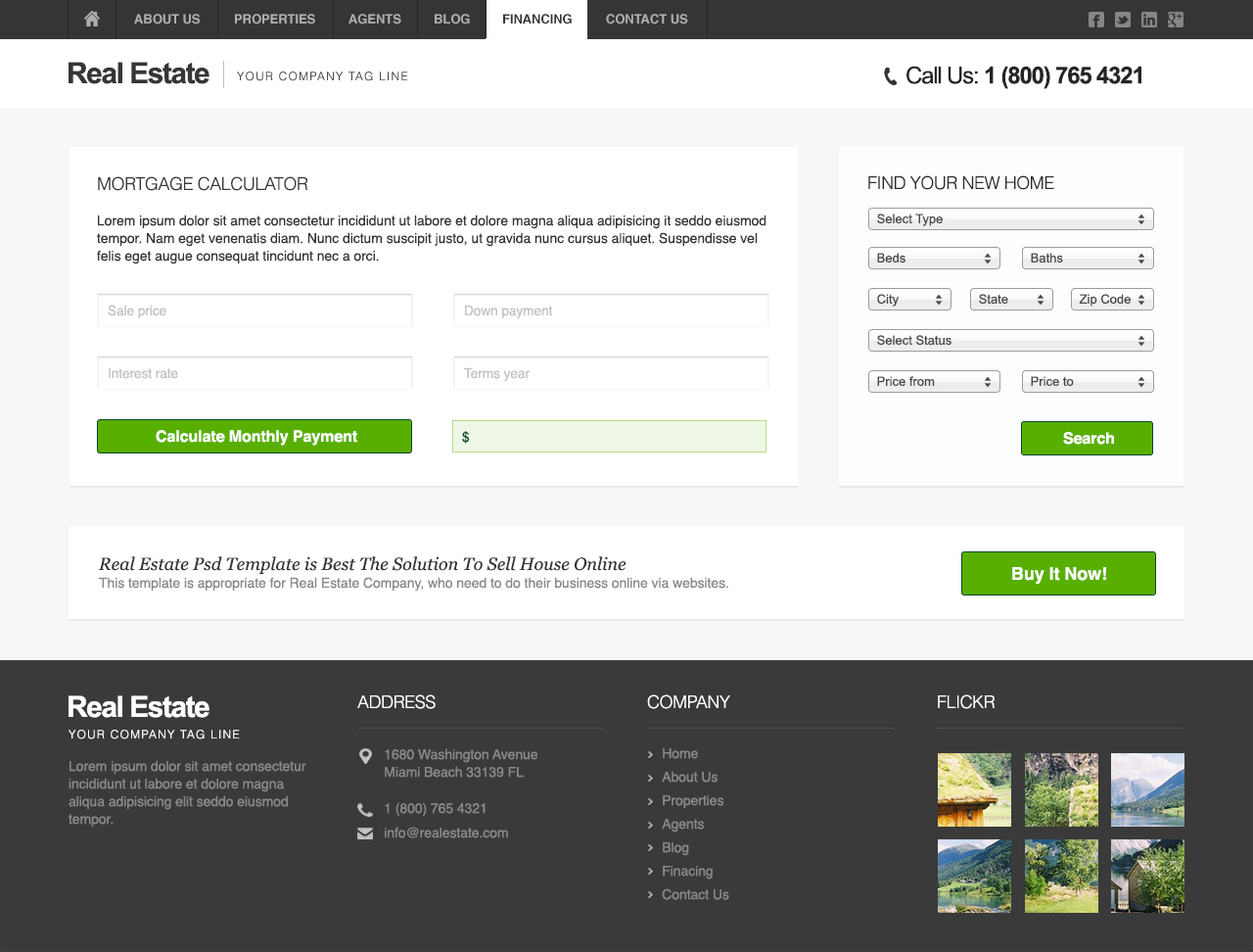
<style>
.page{position:relative;width:1253px;height:952px;background:#ffffff}
.page>*{position:absolute;margin:0}
.t1{font:12.7px "Helvetica-Bold";letter-spacing:-0.005em;color:#aeaeae;text-transform:uppercase}
.t2{font:12.7px "Helvetica-Bold";letter-spacing:-0.005em;color:#363636;text-transform:uppercase}
.t3{font:29.4px "Arial-BoldMT";letter-spacing:-0.05em;color:#363636}
.t4{font:23.5px "Arial-BoldMT";letter-spacing:-0.05em;color:#252525}
.t5{font:23.5px "ArialMT";letter-spacing:-0.05em;color:#252525}
.t6{font:11.7px "Helvetica-Light";letter-spacing:0.1em;color:#4b4b4b;text-transform:uppercase}
.t7{font:17.6px "Helvetica-Light";letter-spacing:-0.025em;color:#363636;text-transform:uppercase}
.t8{font:17.6px "Helvetica-Light";letter-spacing:-0.025em;color:#292929;text-transform:uppercase}
.t9{font:13.7px/17.6px "Helvetica";letter-spacing:-0.005em;color:#363636}
.t10{font:13.7px/29.4px "Helvetica";letter-spacing:-0.005em;color:#363636}
.t11{font:13.7px "Helvetica";letter-spacing:-0.005em;color:#363636}
.t12{font:12.7px "ArialMT";color:#484848}
.t13{font:13.7px "Helvetica";letter-spacing:-0.005em;color:#c2c2c2}
.t14{font:15.7px "Helvetica-Bold";letter-spacing:-0.005em;color:#ffffff}
.t15{font:13.7px "Helvetica";letter-spacing:-0.005em;color:#094530}
.t16{font:13.7px/17.6px "Helvetica";letter-spacing:-0.005em;color:#898989}
.t17{font:17.6px/17.6px "Georgia-Italic";color:#363636}
.t18{font:17.6px "Helvetica-Bold";letter-spacing:-0.005em;color:#ffffff}
.t19{font:29.4px "Arial-BoldMT";letter-spacing:-0.05em;color:#ffffff}
.t20{font:17.6px "Helvetica-Light";letter-spacing:-0.025em;color:#ffffff;text-transform:uppercase}
.t21{font:11.7px "Helvetica-Light";letter-spacing:0.1em;color:#ffffff;text-transform:uppercase}
.t22{font:13.7px/23.5px "Helvetica";letter-spacing:-0.005em;color:#898989}
.t23{font:13.7px "Helvetica";letter-spacing:-0.005em;color:#898989}
</style>
<div class="page">
<p class="t1" style="left:134px;top:14px;width:66px;height:10px">About Us</p>
<p class="t1" style="left:235px;top:14px;width:80px;height:10px">Properties</p>
<p class="t1" style="left:349px;top:14px;width:52px;height:10px">AgentS</p>
<p class="t1" style="left:435px;top:14px;width:35px;height:10px">Blog</p>
<p class="t2" style="left:503px;top:14px;width:69px;height:10px">Financing</p>
<p class="t1" style="left:606px;top:14px;width:82px;height:10px">Contact US</p>
<p class="t3" style="left:69px;top:62px;width:141px;height:22px">Real Estate</p>
<p class="t4" style="left:907px;top:66px;width:235px;height:23px"><span class="t5">Call Us:</span> 1 (800) 765 4321</p>
<p class="t6" style="left:237px;top:71px;width:171px;height:10px">Your Company Tag Line</p>
<p class="t7" style="left:98px;top:176px;width:209px;height:15px">MORTGAGE CALCULATOR</p>
<p class="t8" style="left:868px;top:175px;width:186px;height:15px">Find your new home</p>
<p class="t9" style="left:97px;top:214px;width:670px;height:50px"><span class="t10">Lorem </span><span class="t11">ipsum dolor sit amet consectetur incidi</span>dunt ut labore et dolore magna aliqua adipisicing it seddo eiusmod tempor. Nam eget venenatis diam. Nunc dictum suscipit justo, ut gravida nunc cursus aliquet. Suspendisse vel felis eget augue consequat tincidunt nec a orci.</p>
<p class="t12" style="left:877px;top:213px;width:66px;height:13px">Select Type</p>
<p class="t12" style="left:877px;top:253px;width:29px;height:10px">Beds</p>
<p class="t12" style="left:1031px;top:253px;width:32px;height:10px">Baths</p>
<p class="t12" style="left:877px;top:294px;width:22px;height:12px">City</p>
<p class="t12" style="left:979px;top:294px;width:29px;height:10px">State</p>
<p class="t12" style="left:1079px;top:294px;width:52px;height:12px">Zip Code</p>
<p class="t13" style="left:108px;top:304px;width:58px;height:14px">Sale price</p>
<p class="t13" style="left:465px;top:304px;width:88px;height:15px">Down payment</p>
<p class="t12" style="left:877px;top:335px;width:75px;height:11px">Select Status</p>
<p class="t13" style="left:109px;top:367px;width:69px;height:12px">Interest rate</p>
<p class="t13" style="left:464px;top:367px;width:66px;height:15px">Terms year</p>
<p class="t12" style="left:877px;top:376px;width:58px;height:11px">Price from</p>
<p class="t12" style="left:1031px;top:376px;width:43px;height:11px">Price to</p>
<p class="t14" style="left:156px;top:430px;width:201px;height:15px">Calculate Monthly Payment</p>
<p class="t15" style="left:462px;top:431px;width:8px;height:12px">$</p>
<p class="t14" style="left:1063px;top:432px;width:51px;height:12px">Search</p>
<p class="t16" style="left:98px;top:556px;width:630px;height:35px"><span class="t17">Real Estate Psd Template is Best The Solution To Sell House Online<br></span>This template is appropriate for Real Estate Company, who need to do their business online via websites.</p>
<p class="t18" style="left:1012px;top:567px;width:94px;height:16px">Buy It Now!</p>
<p class="t19" style="left:69px;top:695px;width:141px;height:23px">Real Estate</p>
<p class="t20" style="left:357px;top:694px;width:79px;height:15px">Address</p>
<p class="t20" style="left:647px;top:694px;width:83px;height:15px">Company</p>
<p class="t20" style="left:938px;top:694px;width:57px;height:15px">Flickr</p>
<p class="t21" style="left:69px;top:729px;width:171px;height:10px">Your Company Tag Line</p>
<p class="t16" style="left:385px;top:748px;width:152px;height:29px">1680 Washington Avenue<br>Miami Beach 33139 FL</p>
<p class="t22" style="left:662px;top:748px;width:67px;height:152px">Home<br>About Us<br>Properties<br>Agents<br>Blog<br>Finacing<br>Contact Us</p>
<p class="t16" style="left:69px;top:760px;width:237px;height:66px">Lorem ipsum dolor sit amet consectetur incididunt ut labore et dolore magna aliqua adipisicing elit seddo eiusmod tempor.</p>
<p class="t23" style="left:385px;top:802px;width:101px;height:13px">1 (800) 765 4321</p>
<p class="t23" style="left:385px;top:826px;width:123px;height:12px">info@realestate.com</p>
</div>
